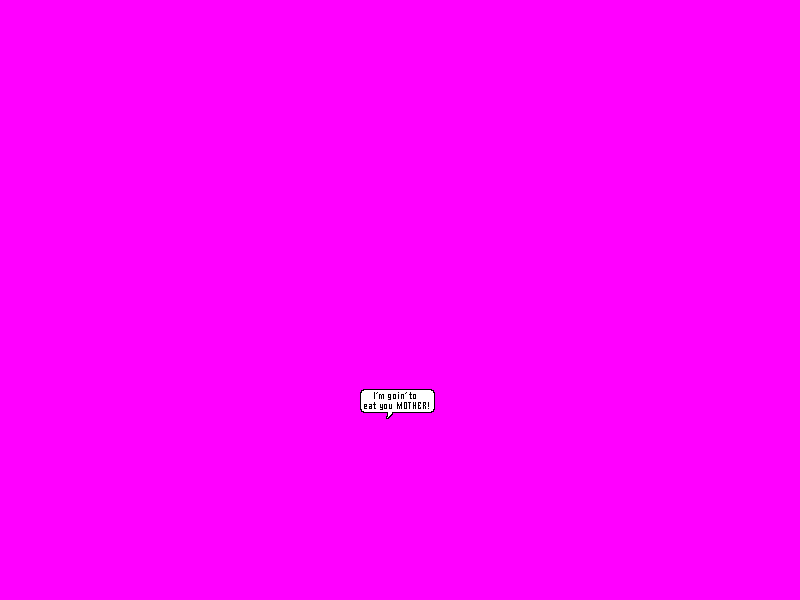
<style>
.page{position:relative;width:800px;height:600px;background:#ff00ff}
.page>*{position:absolute;margin:0}
.t1{font:10px/10px "NiagaraEngraved-Reg";letter-spacing:0.08em;color:#000000}
</style>
<div class="page">
<p class="t1" style="left:364px;top:392px;width:65px;height:18px;text-align:center">I’m goin’ to <br>eat you MOTHER!</p>
</div>
